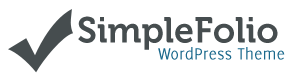
<style>
.page{position:relative;width:300px;height:80px;background:#ffffff}
.page>*{position:absolute;margin:0}
.t1{font:36px "Museo-700";color:#464d4f}
.t2{font:18px "Delicious-Roman";color:#1b698c}
</style>
<div class="page">
<p class="t1" style="left:78px;top:16px;width:200px;height:34px">SimpleFolio</p>
<p class="t2" style="left:158px;top:47px;width:127px;height:13px">WordPress Theme</p>
</div>
